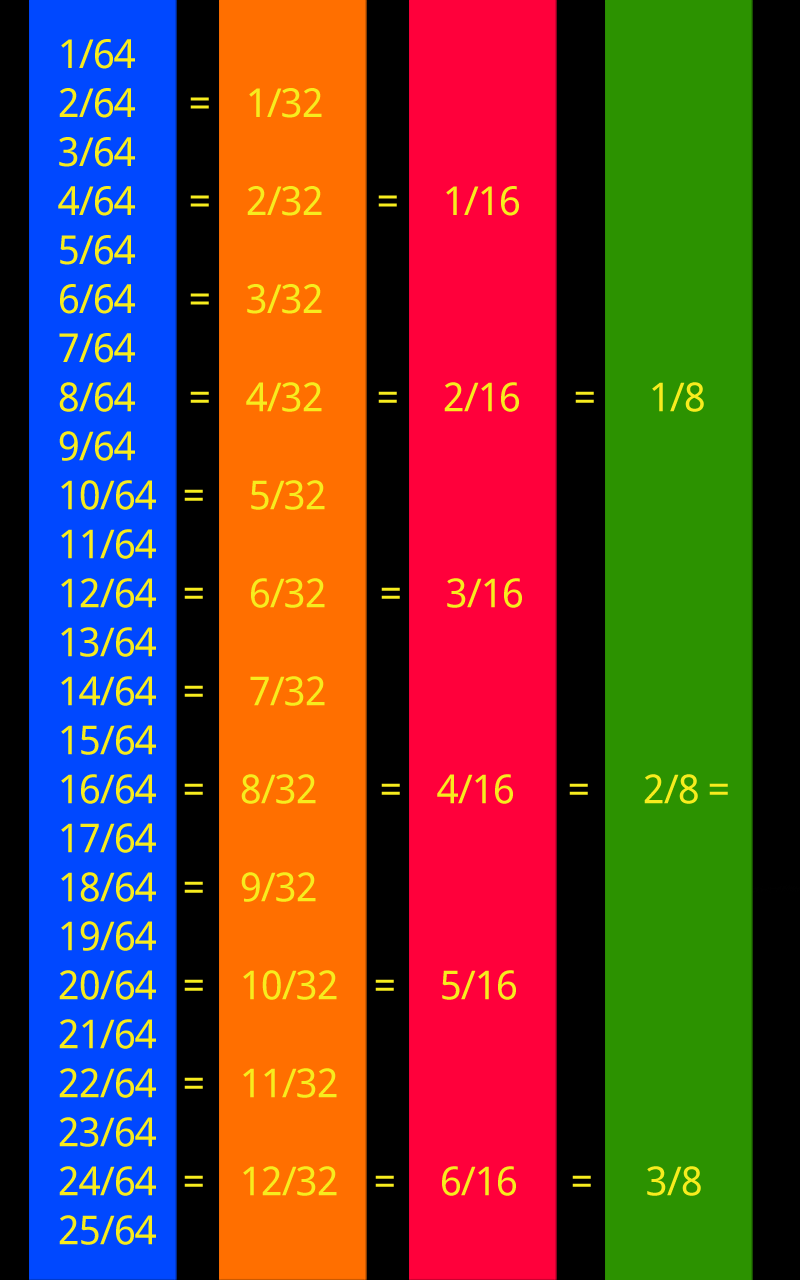
<style>
.page{position:relative;width:800px;height:1280px;background:#000000}
.page>*{position:absolute;margin:0}
.t1{font:40px/49px "DroidSans";letter-spacing:-0.025em;color:#f7ec1e}
</style>
<div class="page">
<p class="t1" style="left:58px;top:39px;width:670px;height:1206px">1/64<br>2/64      =    1/32<br>3/64<br>4/64      =    2/32      =     1/16<br>5/64<br>6/64      =    3/32<br>7/64<br>8/64      =    4/32      =     2/16      =      1/8<br>9/64<br>10/64   =     5/32<br>11/64<br>12/64   =     6/32      =     3/16<br>13/64<br>14/64   =     7/32<br>15/64<br>16/64   =    8/32       =    4/16      =      2/8 = <br>17/64<br>18/64   =    9/32<br>19/64<br>20/64   =    10/32    =     5/16<br>21/64<br>22/64   =    11/32<br>23/64<br>24/64   =    12/32    =     6/16      =      3/8<br>25/64<br>26/64 = 13/32<br>27/64<br>28/64 = 14/32 = 7/16<br>29/64<br>30/64 = 15/32<br>31/64<br>32/64 = 16/32 = 8/16 = 4/8 = 2/4 = 1/2</p>
</div>
